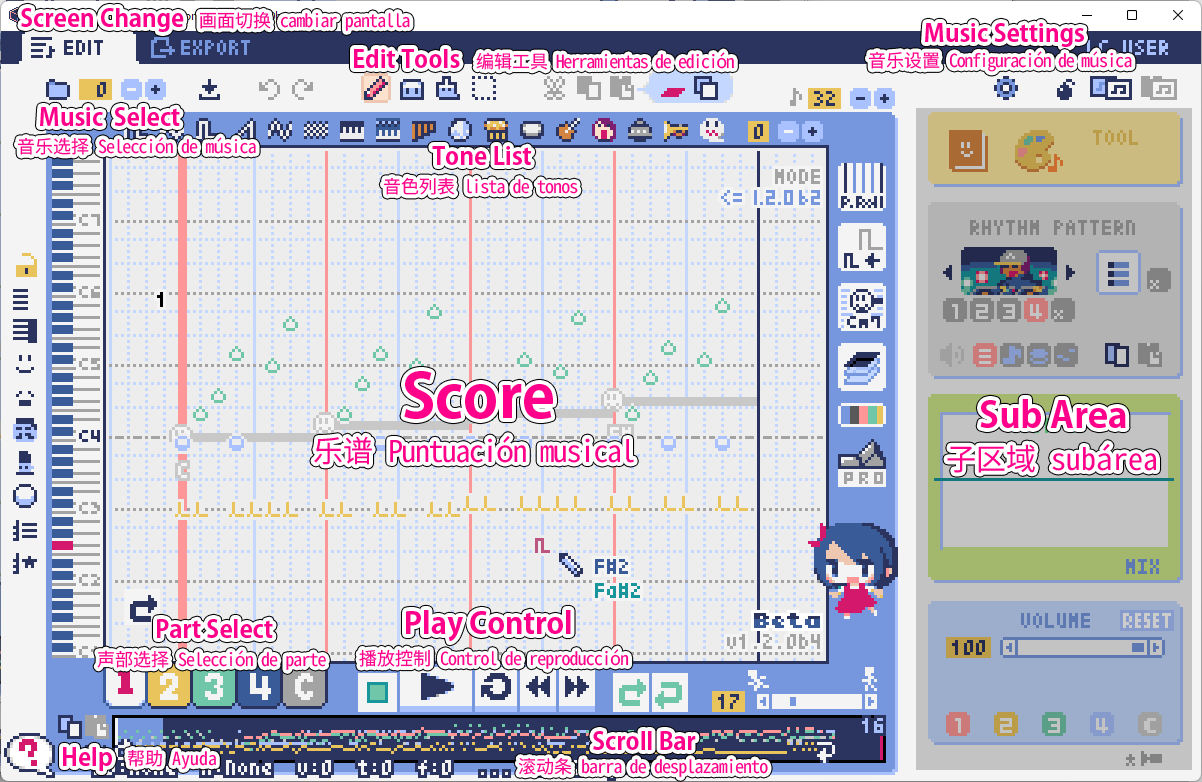
<style>
.page{position:relative;width:1202px;height:782px;background:#ededed}
.page>*{position:absolute;margin:0}
.t1{font:24px "KozGoPro-Bold";color:#ff008a}
.t2{font:18px "SourceHanSansHWVF-Regular";letter-spacing:-0.05em;color:#ff008a}
.t3{font:18px "SourceHanSansHWVF-Regular";color:#ff008a}
.t4{font:18px "SourceHanSansHWVF-Regular";letter-spacing:-0.075em;color:#ff008a}
.t5{font:60px "KozGoPro-Bold";color:#ff008a}
.t6{font:36px "KozGoPro-Bold";color:#ff008a}
.t7{font:30px "SourceHanSansHWVF-Regular";letter-spacing:-0.05em;color:#ff008a}
.t8{font:30px "SourceHanSansHWVF-Regular";color:#ff008a}
.t9{font:30px "KozGoPro-Bold";color:#ff008a}
</style>
<div class="page">
<p class="t1" style="left:21px;top:8px;width:163px;height:24px">Screen Change</p>
<p class="t2" style="left:199px;top:11px;width:211px;height:20px"><span class="t3">画面切换 </span>cambiar pantalla</p>
<p class="t1" style="left:925px;top:23px;width:159px;height:24px">Music Settings</p>
<p class="t1" style="left:354px;top:49px;width:106px;height:19px">Edit Tools</p>
<p class="t4" style="left:476px;top:52px;width:258px;height:18px"><span class="t3">编辑工具</span> Herramientas de edición</p>
<p class="t4" style="left:868px;top:51px;width:264px;height:21px"><span class="t3">音乐设置 </span>Configuración de <span class="t2">música</span></p>
<p class="t1" style="left:40px;top:107px;width:140px;height:19px">Music  Select</p>
<p class="t2" style="left:17px;top:137px;width:239px;height:18px"><span class="t3">音乐选择 </span>Selección de música</p>
<p class="t1" style="left:432px;top:146px;width:99px;height:19px">Tone List</p>
<p class="t2" style="left:383px;top:177px;width:195px;height:18px"><span class="t3">音色列表 </span>lista de tonos</p>
<p class="t5" style="left:404px;top:371px;width:149px;height:48px">Score</p>
<p class="t6" style="left:980px;top:399px;width:146px;height:29px">Sub Area</p>
<p class="t7" style="left:314px;top:436px;width:320px;height:29px"><span class="t8">乐谱 </span>Puntuación musical</p>
<p class="t8" style="left:947px;top:444px;width:209px;height:29px">子区域 subárea</p>
<p class="t9" style="left:406px;top:610px;width:165px;height:32px">Play Control</p>
<p class="t1" style="left:157px;top:619px;width:116px;height:19px">Part Select</p>
<p class="t2" style="left:97px;top:650px;width:229px;height:20px"><span class="t3">声部选择 </span>Selección de parte</p>
<p class="t2" style="left:359px;top:649px;width:270px;height:20px"><span class="t3">播放控制 </span>Control de reproducción</p>
<p class="t1" style="left:593px;top:731px;width:103px;height:19px">Scroll Bar</p>
<p class="t1" style="left:63px;top:747px;width:49px;height:24px">Help</p>
<p class="t3" style="left:128px;top:749px;width:88px;height:20px">帮助 Ayuda</p>
<p class="t2" style="left:518px;top:757px;width:250px;height:20px"><span class="t3">滚动条 </span>barra de desplazamiento</p>
</div>
